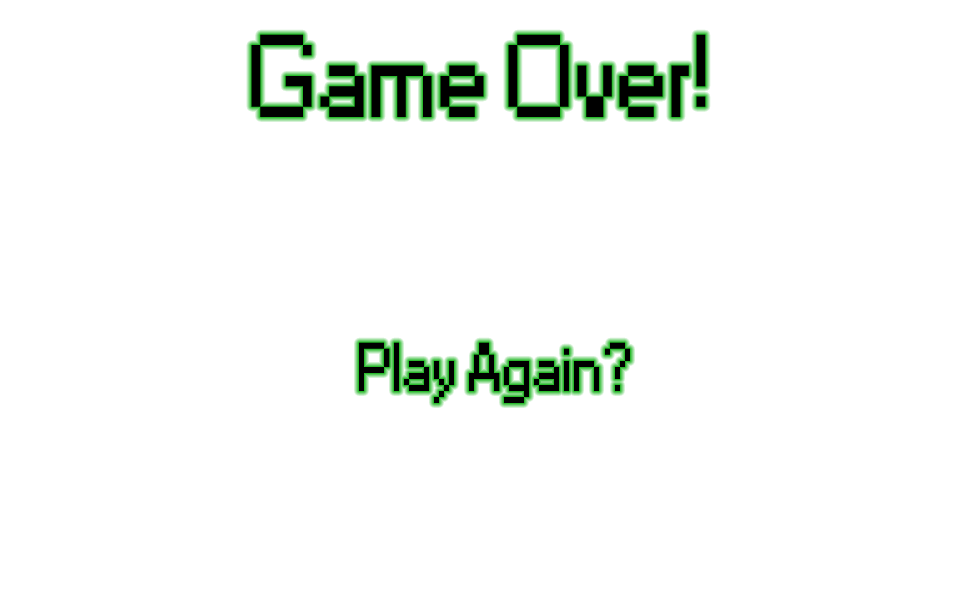
<style>
.page{position:relative;width:960px;height:600px;background:#ffffff}
.page>*{position:absolute;margin:0}
.t1{font:109.6px "Small Fonts";color:#000000}
.t2{font:64.2px "Small Fonts";color:#000000}
</style>
<div class="page">
<p class="t1" style="left:251px;top:34px;width:455px;height:83px">Game Over!</p>
<p class="t2" style="left:359px;top:342px;width:271px;height:61px">Play Again?</p>
</div>
